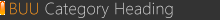
<style>
.page{position:relative;width:220px;height:20px;background:#333333}
.page>*{position:absolute;margin:0}
.t1{font:16.6px "SegoeUI-Light";letter-spacing:0.01em;color:#cccccc}
.t2{font:16.6px "SegoeUI-Light";letter-spacing:0.01em;color:#f7941d}
</style>
<div class="page">
<p class="t1" style="left:10px;top:2px;width:163px;height:16px"><span class="t2">BUU </span>Category Heading</p>
</div>
